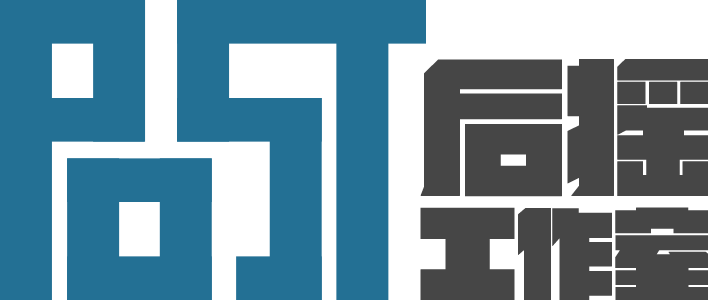
<style>
.page{position:relative;width:708px;height:300px;background:#237094}
.page>*{position:absolute;margin:0}
.t1{font:144px "MFJinHei_Noncommercial-Regular";letter-spacing:-0.04em;color:#464646;font-weight:bold}
.t2{font:98.7px "MFJinHei_Noncommercial-Regular";letter-spacing:-0.04em;color:#464646;font-weight:bold}
</style>
<div class="page">
<p class="t1" style="left:420px;top:59px;width:289px;height:138px">后摇</p>
<p class="t2" style="left:420px;top:207px;width:290px;height:95px">工作室</p>
</div>
